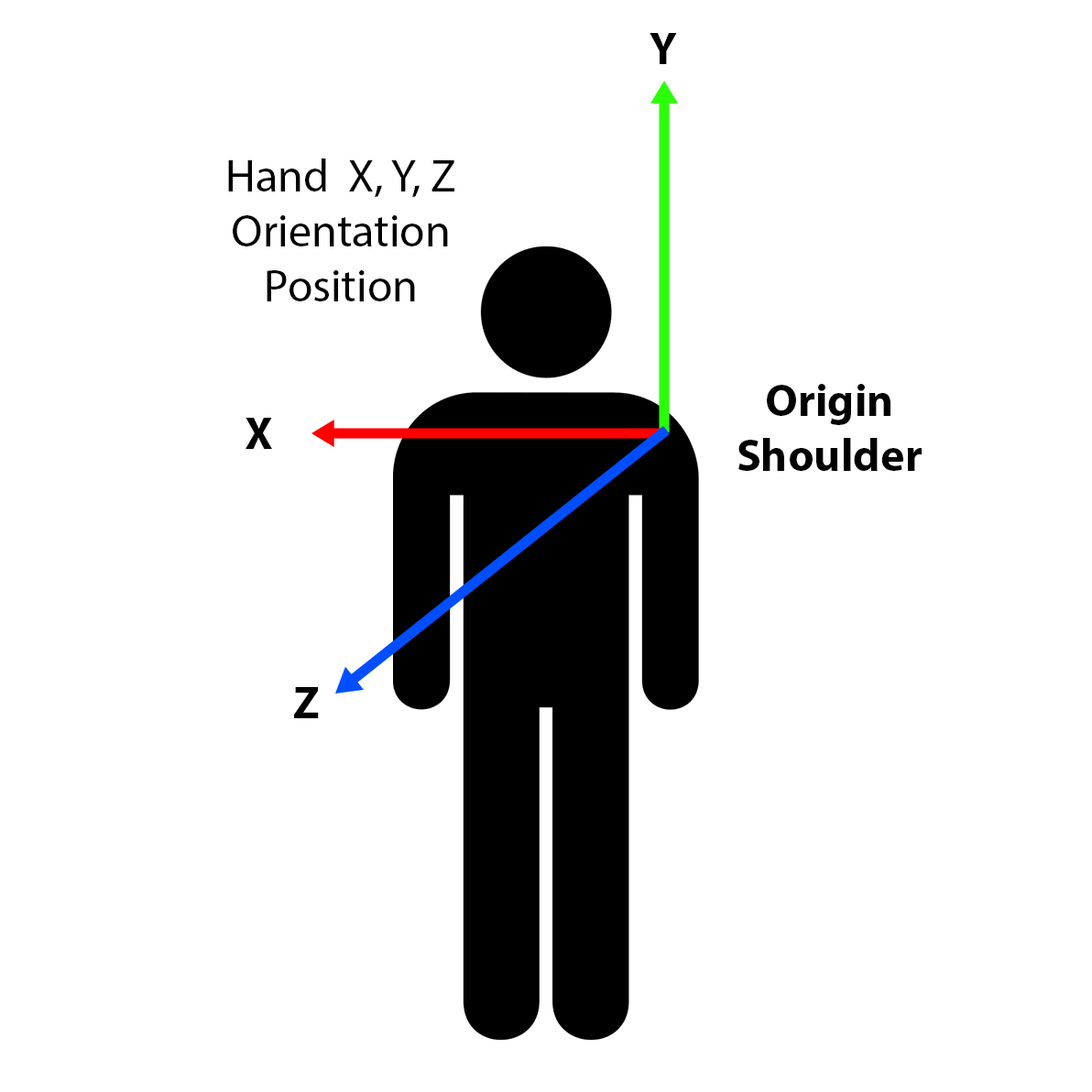
<style>
.page{position:relative;width:1092px;height:1092px;background:#ffffff}
.page>*{position:absolute;margin:0}
.t1{font:45.8px "MyriadPro-Bold";color:#000000}
.t2{font:45.8px "MyriadPro-Regular";color:#000000}
</style>
<div class="page">
<p class="t1" style="left:650px;top:33px;width:27px;height:31px">Y</p>
<p class="t2" style="left:228px;top:158px;width:226px;height:143px;text-align:center">Hand  X, Y, Z<br>Orientation<br>Position</p>
<p class="t1" style="left:738px;top:384px;width:184px;height:87px;text-align:center">Origin<br>Shoulder</p>
<p class="t1" style="left:246px;top:418px;width:26px;height:31px">X</p>
<p class="t1" style="left:294px;top:687px;width:25px;height:31px">Z</p>
</div>
